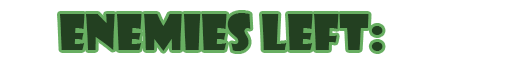
<style>
.page{position:relative;width:512px;height:64px;background:#ffffff}
.page>*{position:absolute;margin:0}
.t1{font:48px "ShowcardGothic-Reg";color:#234021}
</style>
<div class="page">
<p class="t1" style="left:60px;top:13px;width:323px;height:38px">ENEMIES LEFT:</p>
</div>
